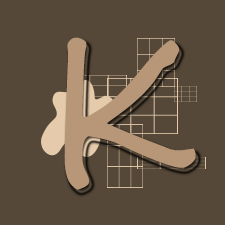
<style>
.page{position:relative;width:225px;height:225px;background:#554838}
.page>*{position:absolute;margin:0}
.t1{font:200px "SegoeScript";color:#b89778;text-transform:uppercase}
</style>
<div class="page">
<p class="t1" style="left:64px;top:37px;width:132px;height:153px">k</p>
</div>
